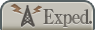
<style>
.page{position:relative;width:95px;height:30px;background:#c5c2b9}
.page>*{position:absolute;margin:0}
.t1{font:20px "RyuminPro-ExBold";letter-spacing:-0.08em;color:#6a6660;scale:0.9 1}
</style>
<div class="page">
<p class="t1" style="left:43px;top:9px;width:49px;height:18px">Exped.</p>
</div>
